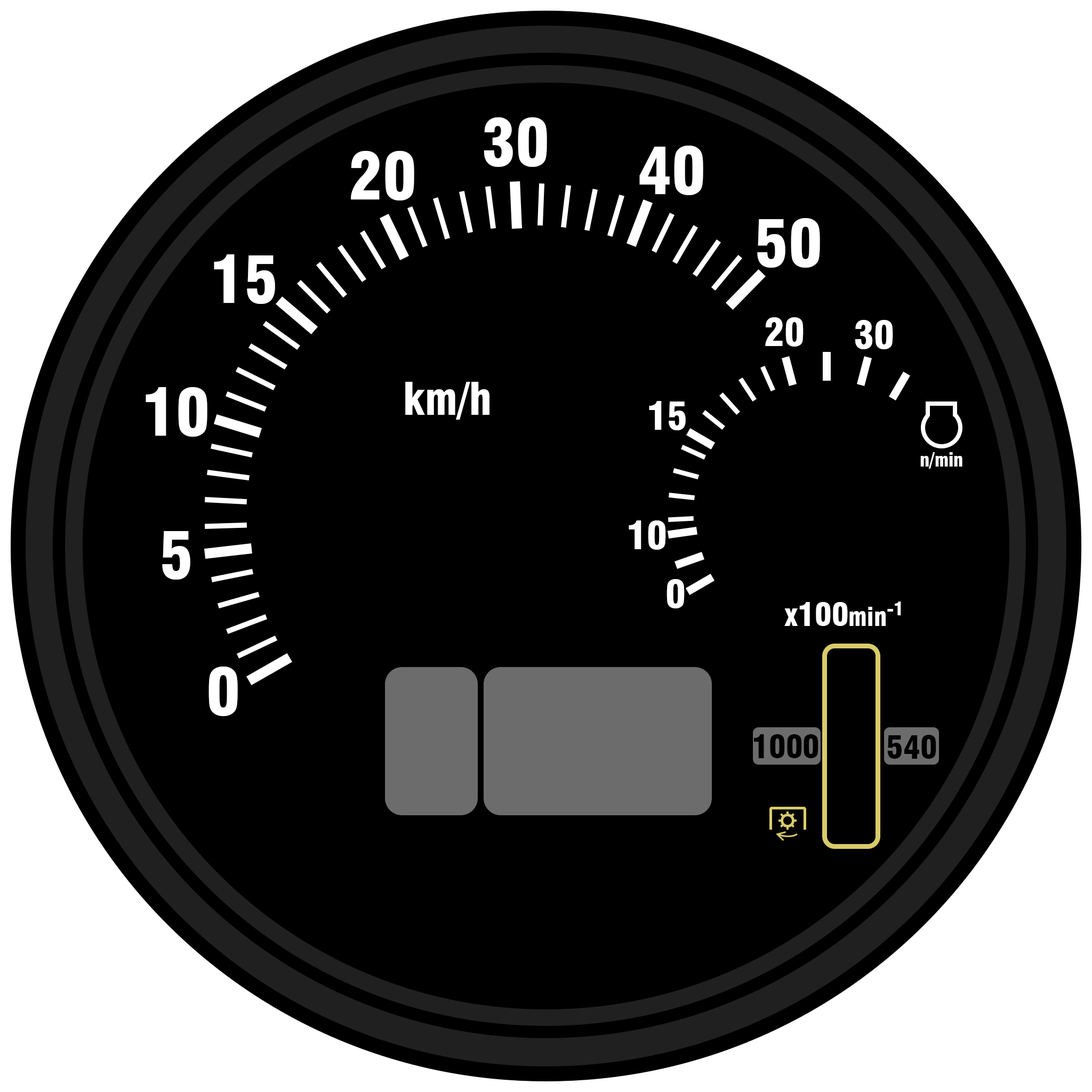
<style>
.page{position:relative;width:1092px;height:1092px;background:#000000}
.page>*{position:absolute;margin:0}
.t1{font:63px "Swiss721BT-BlackCondensed";color:#ffffff}
.t2{font:37.8px "Swiss721BT-BlackCondensed";color:#ffffff}
.t3{font:44.1px "Swiss721BT-BlackCondensed";color:#ffffff}
.t4{font:18.9px "Swiss721BT-BlackCondensed";color:#ffffff}
.t5{font:31.5px "Swiss721BT-BlackCondensed";color:#ffffff}
.t6{font:25.2px "Swiss721BT-BlackCondensed";color:#ffffff}
.t7{font:31.5px "Swiss721BT-BlackCondensed";color:#000000}
</style>
<div class="page">
<p class="t1" style="left:484px;top:117px;width:63px;height:50px">30</p>
<p class="t1" style="left:639px;top:146px;width:64px;height:49px">40</p>
<p class="t1" style="left:351px;top:151px;width:63px;height:49px">20</p>
<p class="t1" style="left:757px;top:218px;width:63px;height:50px">50</p>
<p class="t1" style="left:214px;top:254px;width:61px;height:50px">15</p>
<p class="t2" style="left:765px;top:317px;width:39px;height:30px">20</p>
<p class="t2" style="left:855px;top:320px;width:38px;height:29px">30</p>
<p class="t1" style="left:146px;top:387px;width:61px;height:50px">10</p>
<p class="t3" style="left:405px;top:382px;width:84px;height:38px">km/h</p>
<p class="t2" style="left:649px;top:401px;width:37px;height:29px">15</p>
<p class="t4" style="left:920px;top:452px;width:42px;height:17px">n/min</p>
<p class="t2" style="left:629px;top:520px;width:37px;height:30px">10</p>
<p class="t1" style="left:162px;top:531px;width:28px;height:49px">5</p>
<p class="t2" style="left:666px;top:579px;width:19px;height:29px">0</p>
<p class="t5" style="left:784px;top:601px;width:117px;height:25px">x100<span class="t6">min</span>-1</p>
<p class="t1" style="left:208px;top:666px;width:30px;height:50px">0</p>
<p class="t7" style="left:753px;top:734px;width:65px;height:24px">1000</p>
<p class="t7" style="left:887px;top:735px;width:49px;height:24px">540</p>
</div>
